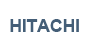
<style>
.page{position:relative;width:90px;height:50px;background:#ffffff}
.page>*{position:absolute;margin:0}
.t1{font:18px "Arial-BoldMT";letter-spacing:-0.02em;color:#445e77}
</style>
<div class="page">
<p class="t1" style="left:10px;top:19px;width:69px;height:13px">HITACHI</p>
</div>
